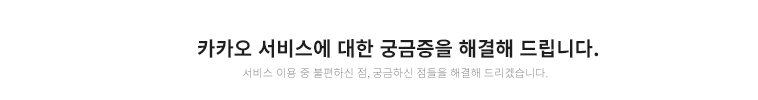
<style>
.page{position:relative;width:758px;height:100px;background:#ffffff}
.page>*{position:absolute;margin:0}
.t1{font:20px "NotoSansKR-Bold";color:#1e1e1e}
.t2{font:11.1px "NotoSansKR-Light"}
</style>
<div class="page">
<p class="t1" style="left:197px;top:39px;width:402px;height:19px">카카오 서비스에 대한 궁금증을 해결해 드립니다.</p>
<p class="t2" style="left:243px;top:67px;width:305px;height:12px">서비스 이용 중 불편하신 점, 궁금하신 점들을 해결해 드리겠습니다.</p>
</div>
